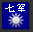
<style>
.page{position:relative;width:33px;height:32px;background:#000090}
.page>*{position:absolute;margin:0}
.t1{font:10.4px "SimSun";color:#ffffff}
</style>
<div class="page">
<p class="t1" style="left:5px;top:4px;width:20px;height:8px">七军</p>
</div>
